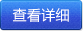
<style>
.page{position:relative;width:83px;height:31px}
.page>*{position:absolute;margin:0}
.t1{font:14px "MicrosoftYaHei";letter-spacing:0.025em;color:#ffffff}
</style>
<div class="page">
<p class="t1" style="left:12px;top:8px;width:57px;height:14px">查看详细</p>
</div>
